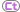
<style>
.page{position:relative;width:20px;height:12px;background:#ffffff}
.page>*{position:absolute;margin:0}
.t1{font:9px "RFGSanSrf-Bd-83pv-RKSJ-H";letter-spacing:-0.025em;color:#bb6ed1;font-weight:bold}
</style>
<div class="page">
<p class="t1" style="left:5px;top:2px;width:12px;height:8px">Ct</p>
</div>
